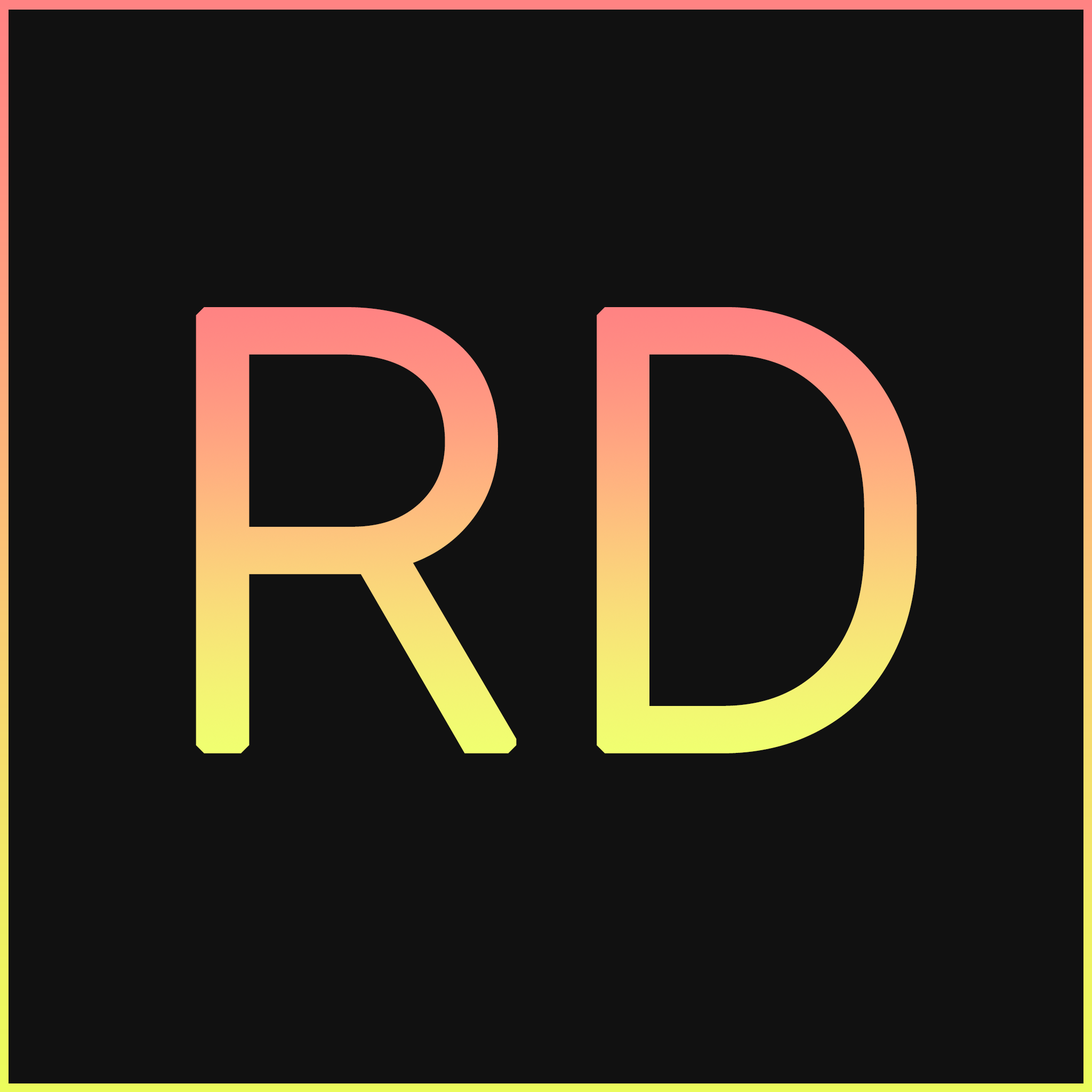
<style>
.page{position:relative;width:1092px;height:1092px;background:#111111}
.page>*{position:absolute;margin:0}
.t1{font:604.1px "Roboto-Light";font-weight:bold}
</style>
<div class="page">
<p class="t1" style="left:196px;top:307px;width:721px;height:446px">RD</p>
</div>
